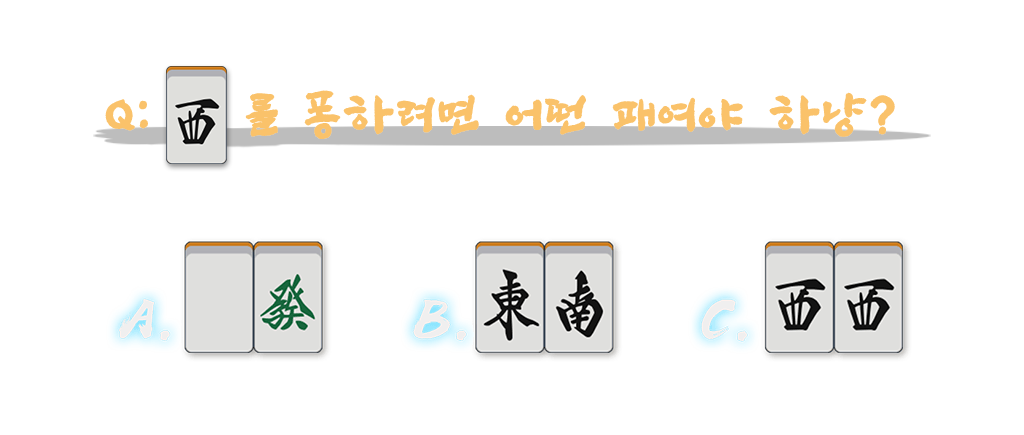
<style>
.page{position:relative;width:1024px;height:435px;background:#ffffff}
.page>*{position:absolute;margin:0}
.t1{font:48px "SangSangRockOTF";letter-spacing:0.06em;color:#fac26a;font-weight:bold}
</style>
<div class="page">
<p class="t1" style="left:105px;top:90px;width:790px;height:49px">Q:    를 퐁하려면 어떤 패여야 하냥?</p>
</div>
